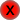
<style>
.page{position:relative;width:20px;height:20px}
.page>*{position:absolute;margin:0}
.t1{font:18px "Helvetica";color:#000000}
</style>
<div class="page">
<p class="t1" style="left:6px;top:5px;width:9px;height:10px">x</p>
</div>
